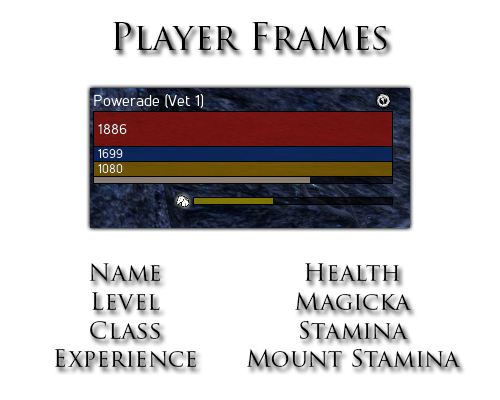
<style>
.page{position:relative;width:500px;height:400px;background:#ffffff}
.page>*{position:absolute;margin:0}
.t1{font:36px "TrajanPro-Regular";color:#000000}
.t2{font:24px "TrajanPro-Regular";color:#000000}
</style>
<div class="page">
<p class="t1" style="left:113px;top:22px;width:274px;height:28px">Player Frames</p>
<p class="t2" style="left:54px;top:263px;width:143px;height:104px;text-align:center">Name<br>Level<br>Class<br>Experience</p>
<p class="t2" style="left:247px;top:263px;width:213px;height:104px;text-align:center">Health<br>Magicka<br>Stamina<br>Mount Stamina</p>
</div>
